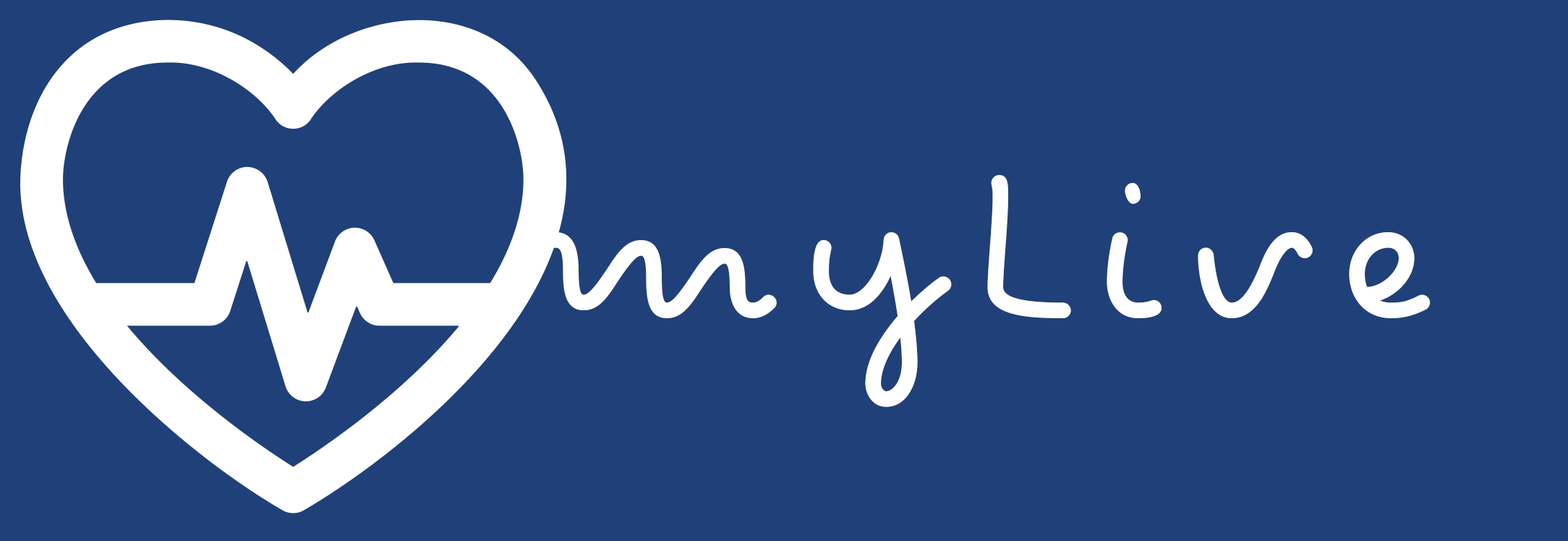
<style>
.page{position:relative;width:1568px;height:541px;background:#204079}
.page>*{position:absolute;margin:0}
.t1{font:260.4px "Pecita";letter-spacing:0.06em;color:#ffffff}
</style>
<div class="page">
<p class="t1" style="left:511px;top:175px;width:920px;height:232px">myLive</p>
</div>
